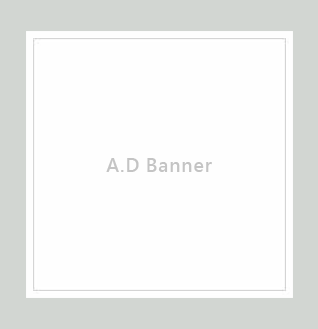
<style>
.page{position:relative;width:318px;height:329px;background:#fefefe}
.page>*{position:absolute;margin:0}
.t1{font:18px "MicrosoftJhengHeiBold";letter-spacing:0.05em;color:#c4c4c4}
</style>
<div class="page">
<p class="t1" style="left:106px;top:158px;width:106px;height:14px">A.D Banner</p>
</div>
